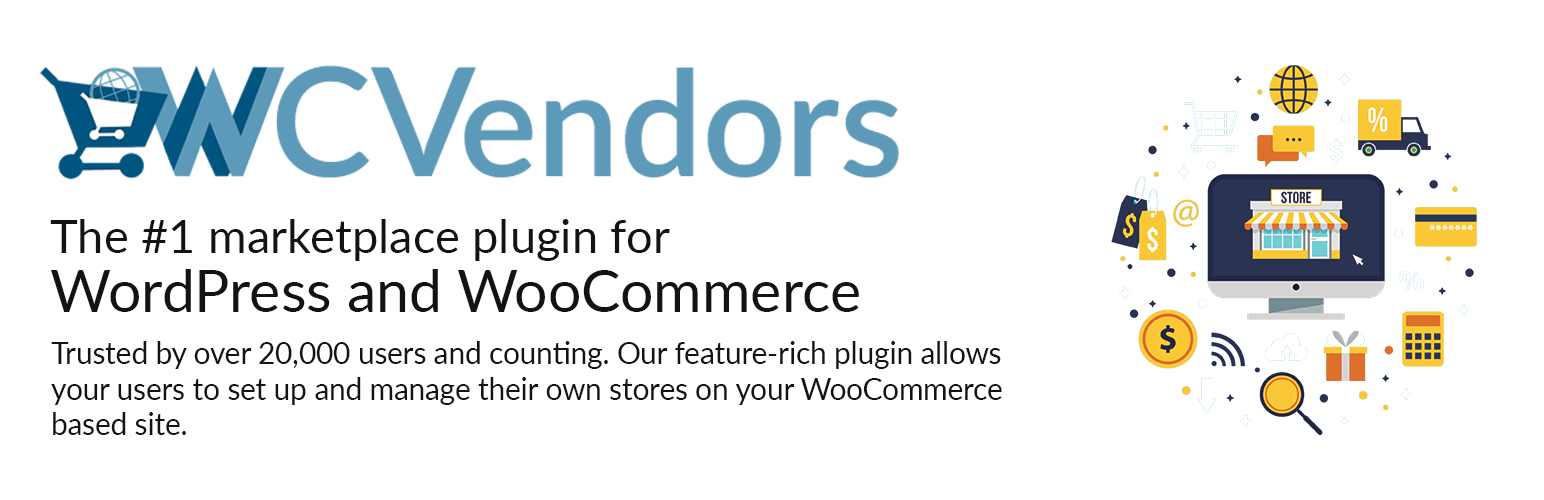
<style>
.page{position:relative;width:1544px;height:500px;background:#ffffff}
.page>*{position:absolute;margin:0}
.t1{font:47.2px/59.1px "Lato-Regular";color:#111317}
.t2{font:59.1px/59.1px "Lato-Regular";color:#111317}
.t3{font:29.5px/35.4px "Lato-Regular";color:#111317}
</style>
<div class="page">
<p class="t1" style="left:50px;top:219px;width:809px;height:93px">The #1 marketplace plugin for <br><span class="t2">WordPress and WooCommerce</span></p>
<p class="t3" style="left:51px;top:341px;width:951px;height:94px">Trusted by over 20,000 users and counting. Our feature-rich plugin allows your users to set up and manage their own stores on your WooCommerce based site.</p>
</div>
